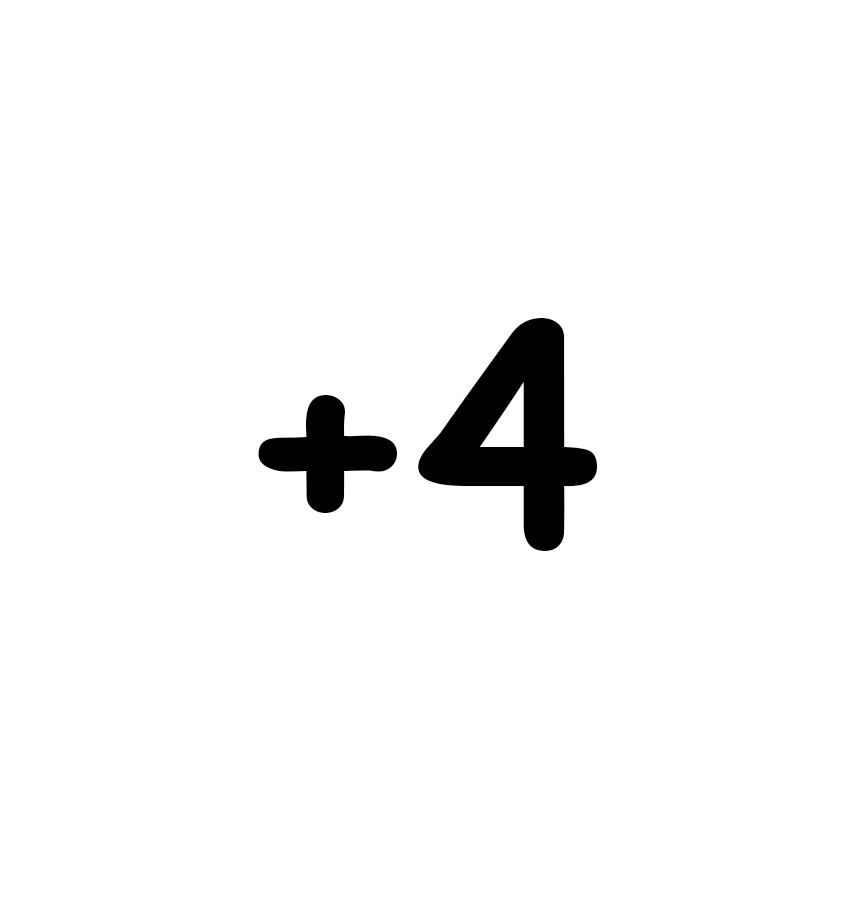
<style>
.page{position:relative;width:859px;height:916px;background:#ffffff}
.page>*{position:absolute;margin:0}
.t1{font:300px "ComicSansMS-Bold";color:#000000;font-variant:small-caps}
</style>
<div class="page">
<p class="t1" style="left:258px;top:318px;width:340px;height:233px">+4</p>
</div>
